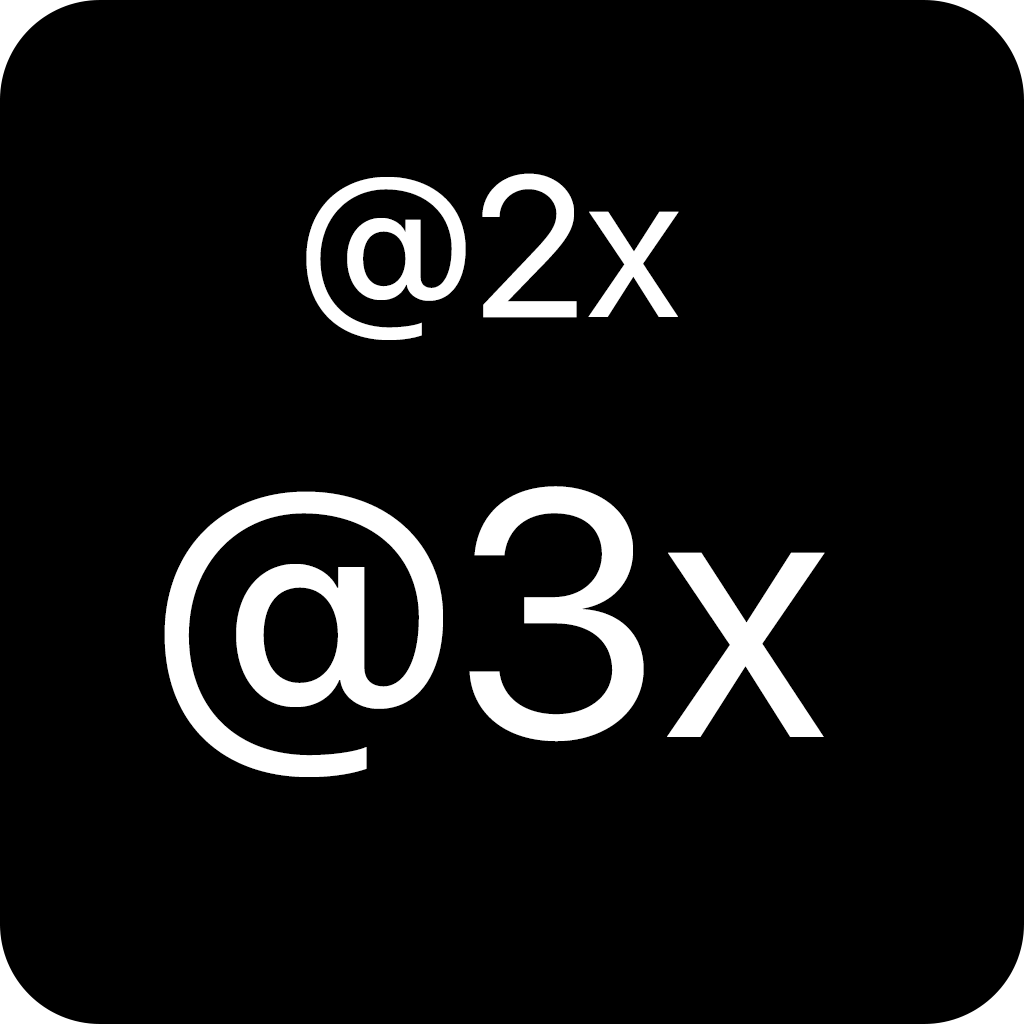
<style>
.page{position:relative;width:1024px;height:1024px;background:#000000}
.page>*{position:absolute;margin:0}
.t1{font:200px "SFUIDisplay-Regular";color:#ffffff}
.t2{font:350px "SFUIDisplay-Regular";color:#ffffff}
</style>
<div class="page">
<p class="t1" style="left:164px;top:173px;width:661px;height:604px;text-align:center">@2x<br><span class="t2">@3x</span></p>
</div>
